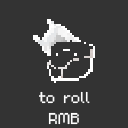
<style>
.page{position:relative;width:128px;height:128px;background:#333333}
.page>*{position:absolute;margin:0}
.t1{font:25px/20.8px "m5x7";color:#ffffff}
</style>
<div class="page">
<p class="t1" style="left:39px;top:91px;width:51px;height:34px;text-align:center">to roll<br>RMB</p>
</div>
